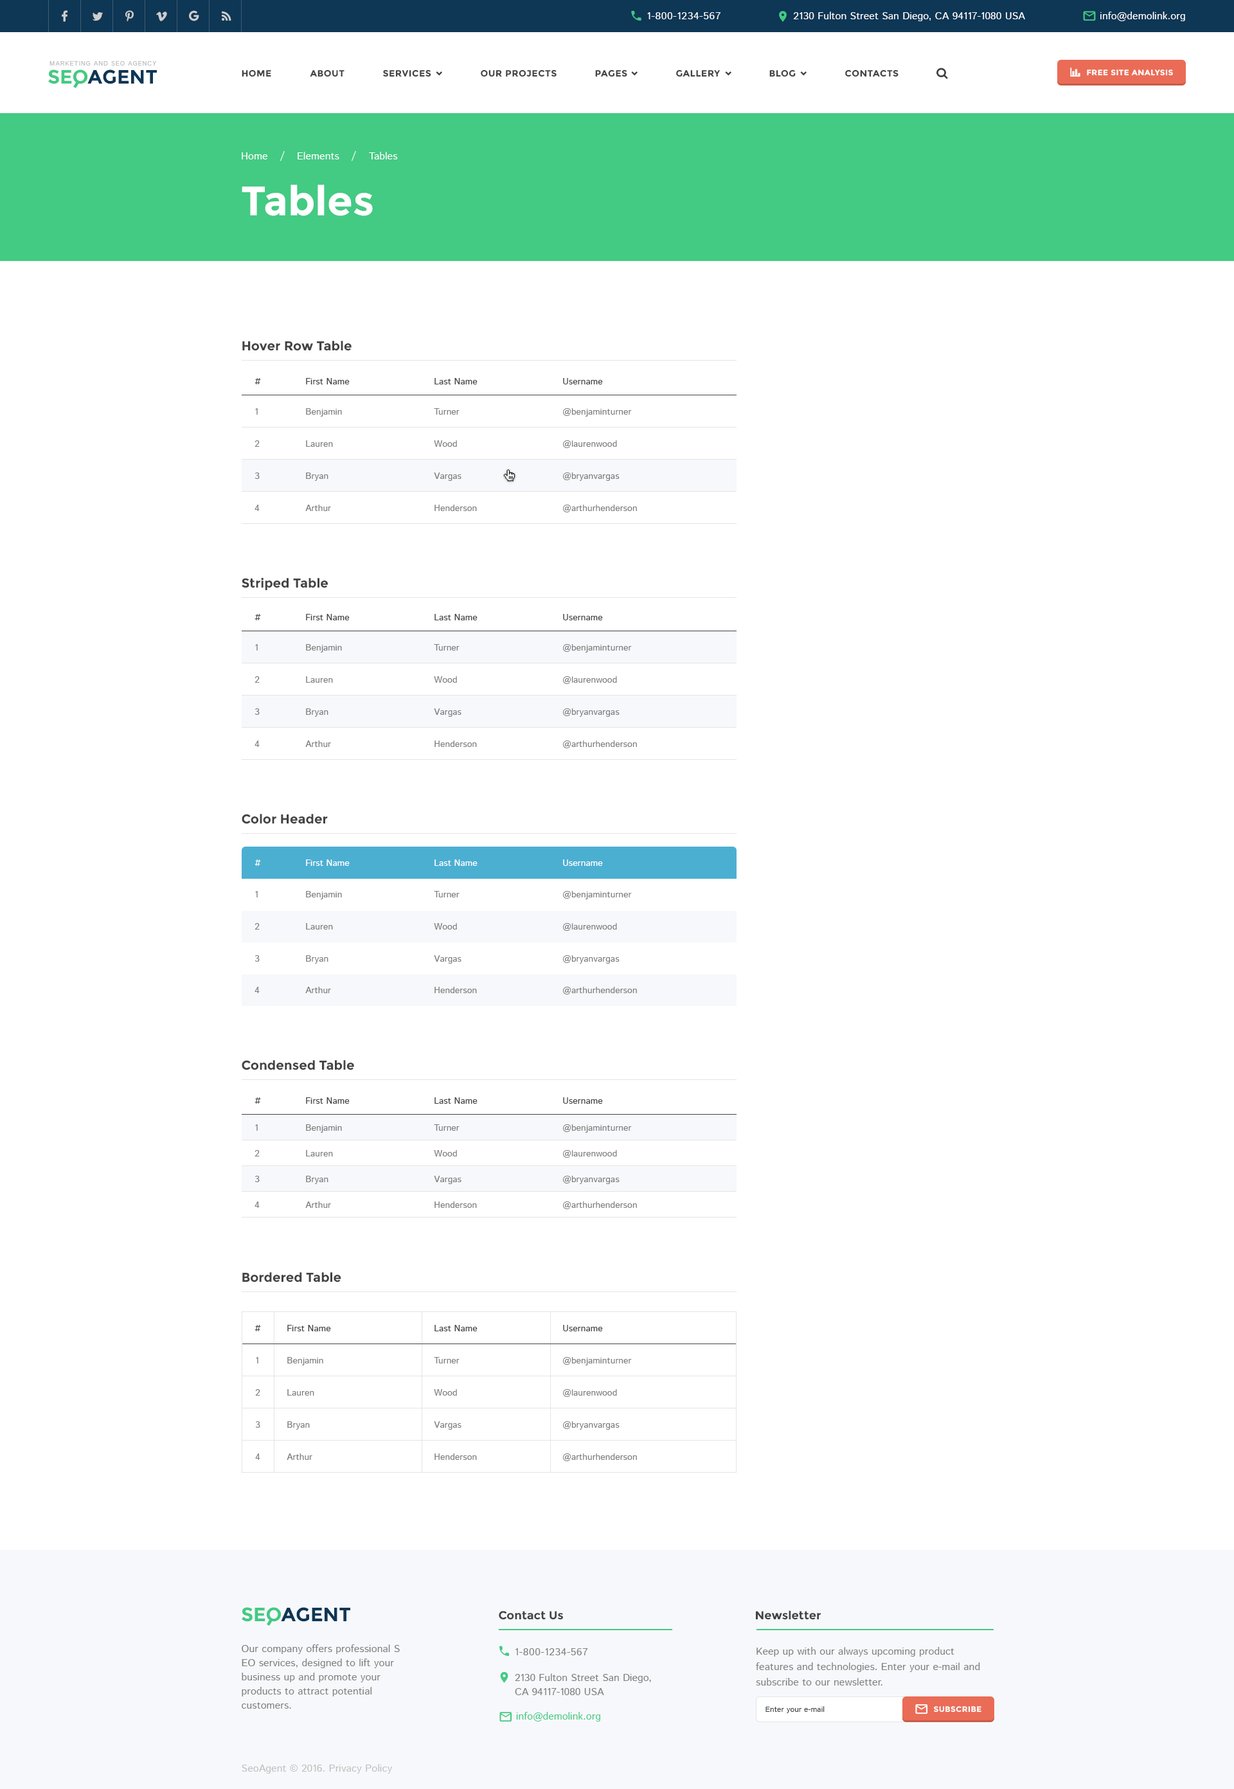
<style>
.page{position:relative;width:1234px;height:1789px;background:#ffffff}
.page>*{position:absolute;margin:0}
.t1{font:10.3px "IstokWeb-Regular";letter-spacing:0.04em;color:#ffffff;text-transform:uppercase}
.t2{font:10.3px "IstokWeb-Regular";color:#ffffff}
.t3{font:6.4px "IstokWeb-Regular";letter-spacing:0.08em;color:#c1c1c1;text-transform:uppercase}
.t4{font:19.3px "Montserrat-Bold";color:#43ca83}
.t5{font:19.3px "Montserrat-Bold";color:#0e3655}
.t6{font:9px "Montserrat-Bold";letter-spacing:0.04em;color:#424343;text-transform:uppercase}
.t7{font:7.7px "Montserrat-Bold";letter-spacing:0.04em;color:#ffffff;text-transform:uppercase}
.t8{font:41.1px "Montserrat-Bold";color:#ffffff}
.t9{font:12.9px "Montserrat-Bold";color:#424343}
.t10{font:9px "IstokWeb-Regular";color:#424343}
.t11{font:9px "IstokWeb-Regular";color:#7f7f7f}
.t12{font:9px "IstokWeb-Regular";color:#ffffff}
.t13{font:11.6px "Montserrat-Bold";color:#424343}
.t14{font:10.3px/14.1px "IstokWeb-Regular";color:#7f7f7f}
.t15{font:10.3px "IstokWeb-Regular";letter-spacing:0.04em;color:#7f7f7f;text-transform:uppercase}
.t16{font:10.3px/15.4px "IstokWeb-Regular";color:#7f7f7f}
.t17{font:7.7px "IstokWeb-Regular";color:#424343}
.t18{font:10.3px "IstokWeb-Regular";color:#43ca83}
.t19{font:10.3px "IstokWeb-Regular";color:#c0c0c0}
</style>
<div class="page">
<p class="t1" style="left:647px;top:12px;width:74px;height:7px">1-800-1234-567</p>
<p class="t2" style="left:793px;top:12px;width:232px;height:9px">2130 Fulton Street San Diego, CA 94117-1080 USA</p>
<p class="t2" style="left:1101px;top:12px;width:84px;height:9px">info@demolink.org</p>
<p class="t3" style="left:50px;top:61px;width:107px;height:5px">Marketing and SEO agency</p>
<p class="t4" style="left:48px;top:69px;width:39px;height:15px">SEO</p>
<p class="t5" style="left:87px;top:69px;width:70px;height:15px">AGENT</p>
<p class="t6" style="left:242px;top:69px;width:29px;height:8px">Home</p>
<p class="t6" style="left:310px;top:69px;width:35px;height:8px">about</p>
<p class="t6" style="left:383px;top:69px;width:48px;height:8px">services</p>
<p class="t6" style="left:481px;top:69px;width:76px;height:8px">our projects</p>
<p class="t6" style="left:595px;top:69px;width:32px;height:8px">pages</p>
<p class="t6" style="left:676px;top:69px;width:45px;height:8px">gallery</p>
<p class="t6" style="left:770px;top:69px;width:26px;height:8px">blog</p>
<p class="t6" style="left:845px;top:69px;width:54px;height:8px">contacts</p>
<p class="t7" style="left:1087px;top:69px;width:86px;height:7px">Free Site Analysis</p>
<p class="t2" style="left:242px;top:152px;width:25px;height:7px">Home</p>
<p class="t2" style="left:280px;top:151px;width:5px;height:10px">/</p>
<p class="t2" style="left:298px;top:152px;width:41px;height:7px">Elements</p>
<p class="t2" style="left:352px;top:151px;width:4px;height:10px">/</p>
<p class="t2" style="left:369px;top:152px;width:29px;height:7px">Tables</p>
<p class="t8" style="left:242px;top:184px;width:131px;height:32px">Tables</p>
<p class="t9" style="left:242px;top:341px;width:110px;height:10px">Hover Row Table</p>
<p class="t10" style="left:255px;top:378px;width:6px;height:6px">#</p>
<p class="t10" style="left:306px;top:378px;width:44px;height:6px">First Name</p>
<p class="t10" style="left:435px;top:378px;width:43px;height:6px">Last Name</p>
<p class="t10" style="left:563px;top:378px;width:40px;height:6px">Username</p>
<p class="t11" style="left:255px;top:408px;width:3px;height:7px">1</p>
<p class="t11" style="left:306px;top:408px;width:36px;height:9px">Benjamin</p>
<p class="t11" style="left:434px;top:408px;width:26px;height:7px">Turner</p>
<p class="t11" style="left:563px;top:408px;width:69px;height:9px">@benjaminturner</p>
<p class="t11" style="left:255px;top:440px;width:5px;height:7px">2</p>
<p class="t11" style="left:306px;top:440px;width:27px;height:7px">Lauren</p>
<p class="t11" style="left:434px;top:440px;width:23px;height:7px">Wood</p>
<p class="t11" style="left:563px;top:440px;width:54px;height:8px">@laurenwood</p>
<p class="t11" style="left:255px;top:473px;width:5px;height:6px">3</p>
<p class="t11" style="left:306px;top:473px;width:22px;height:8px">Bryan</p>
<p class="t11" style="left:434px;top:473px;width:28px;height:8px">Vargas</p>
<p class="t11" style="left:563px;top:473px;width:57px;height:8px">@bryanvargas</p>
<p class="t11" style="left:255px;top:505px;width:5px;height:6px">4</p>
<p class="t11" style="left:305px;top:505px;width:26px;height:6px">Arthur</p>
<p class="t11" style="left:435px;top:505px;width:42px;height:6px">Henderson</p>
<p class="t11" style="left:563px;top:505px;width:74px;height:7px">@arthurhenderson</p>
<p class="t9" style="left:242px;top:577px;width:86px;height:13px">Striped Table</p>
<p class="t10" style="left:255px;top:614px;width:6px;height:6px">#</p>
<p class="t10" style="left:306px;top:614px;width:44px;height:6px">First Name</p>
<p class="t10" style="left:435px;top:614px;width:43px;height:6px">Last Name</p>
<p class="t10" style="left:563px;top:614px;width:40px;height:6px">Username</p>
<p class="t11" style="left:255px;top:644px;width:3px;height:7px">1</p>
<p class="t11" style="left:306px;top:644px;width:36px;height:8px">Benjamin</p>
<p class="t11" style="left:434px;top:644px;width:26px;height:7px">Turner</p>
<p class="t11" style="left:563px;top:644px;width:69px;height:8px">@benjaminturner</p>
<p class="t11" style="left:255px;top:676px;width:5px;height:7px">2</p>
<p class="t11" style="left:306px;top:676px;width:27px;height:7px">Lauren</p>
<p class="t11" style="left:434px;top:676px;width:23px;height:7px">Wood</p>
<p class="t11" style="left:563px;top:676px;width:54px;height:8px">@laurenwood</p>
<p class="t11" style="left:255px;top:708px;width:5px;height:7px">3</p>
<p class="t11" style="left:306px;top:708px;width:22px;height:9px">Bryan</p>
<p class="t11" style="left:434px;top:708px;width:28px;height:9px">Vargas</p>
<p class="t11" style="left:563px;top:708px;width:57px;height:9px">@bryanvargas</p>
<p class="t11" style="left:255px;top:741px;width:5px;height:6px">4</p>
<p class="t11" style="left:305px;top:741px;width:26px;height:6px">Arthur</p>
<p class="t11" style="left:435px;top:741px;width:42px;height:6px">Henderson</p>
<p class="t11" style="left:563px;top:741px;width:74px;height:7px">@arthurhenderson</p>
<p class="t9" style="left:242px;top:814px;width:86px;height:10px">Color Header</p>
<p class="t12" style="left:255px;top:860px;width:6px;height:6px">#</p>
<p class="t12" style="left:306px;top:860px;width:44px;height:6px">First Name</p>
<p class="t12" style="left:435px;top:860px;width:43px;height:6px">Last Name</p>
<p class="t12" style="left:563px;top:860px;width:40px;height:6px">Username</p>
<p class="t11" style="left:255px;top:891px;width:3px;height:6px">1</p>
<p class="t11" style="left:306px;top:891px;width:36px;height:8px">Benjamin</p>
<p class="t11" style="left:434px;top:891px;width:26px;height:6px">Turner</p>
<p class="t11" style="left:563px;top:891px;width:69px;height:8px">@benjaminturner</p>
<p class="t11" style="left:255px;top:923px;width:5px;height:7px">2</p>
<p class="t11" style="left:306px;top:923px;width:27px;height:7px">Lauren</p>
<p class="t11" style="left:434px;top:923px;width:23px;height:7px">Wood</p>
<p class="t11" style="left:563px;top:923px;width:54px;height:8px">@laurenwood</p>
<p class="t11" style="left:255px;top:955px;width:5px;height:7px">3</p>
<p class="t11" style="left:306px;top:955px;width:22px;height:9px">Bryan</p>
<p class="t11" style="left:434px;top:955px;width:28px;height:9px">Vargas</p>
<p class="t11" style="left:563px;top:955px;width:57px;height:9px">@bryanvargas</p>
<p class="t11" style="left:255px;top:987px;width:5px;height:6px">4</p>
<p class="t11" style="left:305px;top:987px;width:26px;height:6px">Arthur</p>
<p class="t11" style="left:435px;top:987px;width:42px;height:6px">Henderson</p>
<p class="t11" style="left:563px;top:987px;width:74px;height:8px">@arthurhenderson</p>
<p class="t9" style="left:242px;top:1060px;width:112px;height:10px">Condensed Table</p>
<p class="t10" style="left:255px;top:1097px;width:6px;height:7px">#</p>
<p class="t10" style="left:306px;top:1097px;width:44px;height:7px">First Name</p>
<p class="t10" style="left:435px;top:1097px;width:43px;height:7px">Last Name</p>
<p class="t10" style="left:563px;top:1097px;width:40px;height:7px">Username</p>
<p class="t11" style="left:255px;top:1124px;width:3px;height:7px">1</p>
<p class="t11" style="left:306px;top:1124px;width:36px;height:9px">Benjamin</p>
<p class="t11" style="left:434px;top:1124px;width:26px;height:7px">Turner</p>
<p class="t11" style="left:563px;top:1124px;width:69px;height:9px">@benjaminturner</p>
<p class="t11" style="left:255px;top:1150px;width:5px;height:6px">2</p>
<p class="t11" style="left:306px;top:1150px;width:27px;height:6px">Lauren</p>
<p class="t11" style="left:434px;top:1150px;width:23px;height:6px">Wood</p>
<p class="t11" style="left:563px;top:1150px;width:54px;height:8px">@laurenwood</p>
<p class="t11" style="left:255px;top:1176px;width:5px;height:6px">3</p>
<p class="t11" style="left:306px;top:1176px;width:22px;height:8px">Bryan</p>
<p class="t11" style="left:434px;top:1176px;width:28px;height:8px">Vargas</p>
<p class="t11" style="left:563px;top:1176px;width:57px;height:8px">@bryanvargas</p>
<p class="t11" style="left:255px;top:1202px;width:5px;height:6px">4</p>
<p class="t11" style="left:305px;top:1202px;width:26px;height:6px">Arthur</p>
<p class="t11" style="left:435px;top:1202px;width:42px;height:6px">Henderson</p>
<p class="t11" style="left:563px;top:1202px;width:74px;height:7px">@arthurhenderson</p>
<p class="t9" style="left:242px;top:1272px;width:99px;height:10px">Bordered Table</p>
<p class="t10" style="left:255px;top:1325px;width:6px;height:6px">#</p>
<p class="t10" style="left:287px;top:1325px;width:44px;height:6px">First Name</p>
<p class="t10" style="left:435px;top:1325px;width:43px;height:6px">Last Name</p>
<p class="t10" style="left:563px;top:1325px;width:40px;height:6px">Username</p>
<p class="t11" style="left:256px;top:1357px;width:2px;height:7px">1</p>
<p class="t11" style="left:287px;top:1357px;width:36px;height:8px">Benjamin</p>
<p class="t11" style="left:434px;top:1357px;width:26px;height:7px">Turner</p>
<p class="t11" style="left:563px;top:1357px;width:69px;height:8px">@benjaminturner</p>
<p class="t11" style="left:255px;top:1389px;width:5px;height:7px">2</p>
<p class="t11" style="left:287px;top:1389px;width:27px;height:7px">Lauren</p>
<p class="t11" style="left:434px;top:1389px;width:23px;height:7px">Wood</p>
<p class="t11" style="left:563px;top:1389px;width:54px;height:8px">@laurenwood</p>
<p class="t11" style="left:256px;top:1421px;width:4px;height:7px">3</p>
<p class="t11" style="left:287px;top:1421px;width:23px;height:9px">Bryan</p>
<p class="t11" style="left:434px;top:1421px;width:28px;height:9px">Vargas</p>
<p class="t11" style="left:563px;top:1421px;width:57px;height:9px">@bryanvargas</p>
<p class="t11" style="left:255px;top:1454px;width:5px;height:6px">4</p>
<p class="t11" style="left:287px;top:1454px;width:25px;height:6px">Arthur</p>
<p class="t11" style="left:435px;top:1454px;width:42px;height:6px">Henderson</p>
<p class="t11" style="left:563px;top:1454px;width:74px;height:7px">@arthurhenderson</p>
<p class="t4" style="left:242px;top:1607px;width:39px;height:15px">SEO</p>
<p class="t5" style="left:281px;top:1607px;width:69px;height:15px">AGENT</p>
<p class="t13" style="left:499px;top:1611px;width:64px;height:9px">Contact Us</p>
<p class="t13" style="left:756px;top:1610px;width:65px;height:10px">Newsletter</p>
<p class="t14" style="left:242px;top:1644px;width:158px;height:65px">Our company offers professional S<br>EO services, designed to lift your business up and promote your products to attract potential customers.</p>
<p class="t15" style="left:516px;top:1648px;width:72px;height:7px">1-800-1234-567</p>
<p class="t16" style="left:756px;top:1647px;width:224px;height:39px">Keep up with our always upcoming product features and technologies. Enter your e-mail and subscribe to our newsletter.</p>
<p class="t14" style="left:515px;top:1673px;width:136px;height:22px">2130 Fulton Street San Diego,<br>CA 94117-1080 USA</p>
<p class="t17" style="left:766px;top:1706px;width:59px;height:7px">Enter your e-mail</p>
<p class="t7" style="left:934px;top:1706px;width:48px;height:7px">subscribe</p>
<p class="t18" style="left:516px;top:1712px;width:84px;height:10px">info@demolink.org</p>
<p class="t19" style="left:242px;top:1764px;width:151px;height:10px">SeoAgent © 2016. Privacy Policy</p>
</div>
